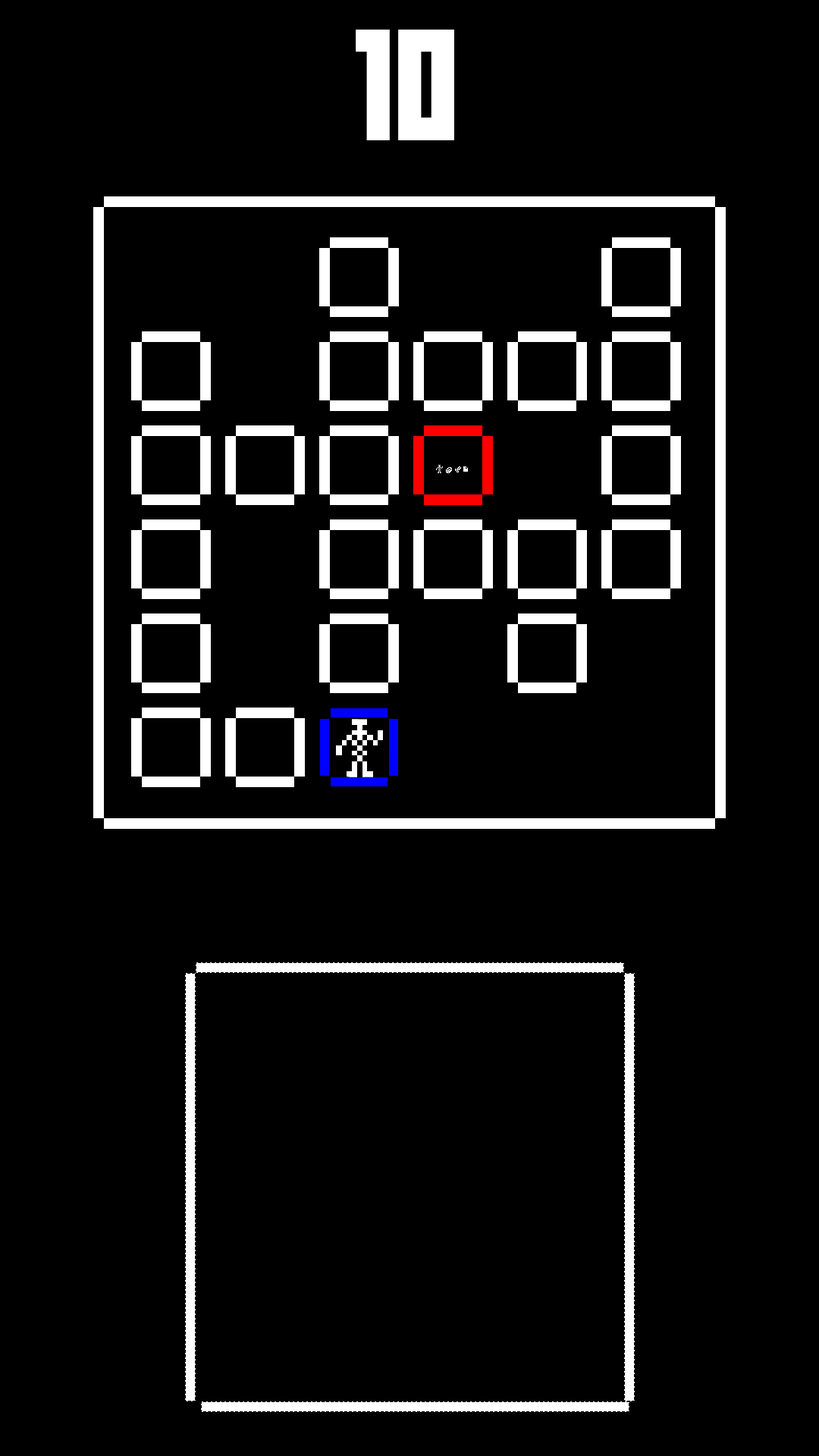
<style>
.page{position:relative;width:819px;height:1456px;background:#000000}
.page>*{position:absolute;margin:0}
.t1{font:151.7px "FFFForward";letter-spacing:-0.025em;color:#ffffff}
</style>
<div class="page">
<p class="t1" style="left:356px;top:30px;width:98px;height:110px">10</p>
</div>
